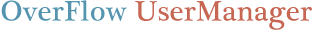
<style>
.page{position:relative;width:313px;height:30px;background:#ffffff}
.page>*{position:absolute;margin:0}
.t1{font:29px "PlantagenetCherokee";letter-spacing:0.01em;color:#c66653}
.t2{font:29px "PlantagenetCherokee";letter-spacing:0.01em;color:#5494af}
</style>
<div class="page">
<p class="t1" style="left:1px;top:0px;width:311px;height:30px"><span class="t2">OverFlow </span>UserManager</p>
</div>
